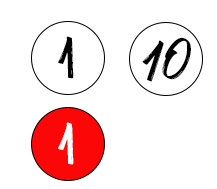
<style>
.page{position:relative;width:217px;height:189px;background:#ffffff}
.page>*{position:absolute;margin:0}
.t1{font:48px "MarkMyWords";color:#000000}
.t2{font:48px "MarkMyWords";color:#ffffff}
</style>
<div class="page">
<p class="t1" style="left:58px;top:36px;width:16px;height:43px;rotate:-27deg">1</p>
<p class="t1" style="left:142px;top:37px;width:49px;height:45px;rotate:-7deg">10</p>
<p class="t2" style="left:58px;top:122px;width:16px;height:43px;rotate:-27deg">1</p>
</div>
